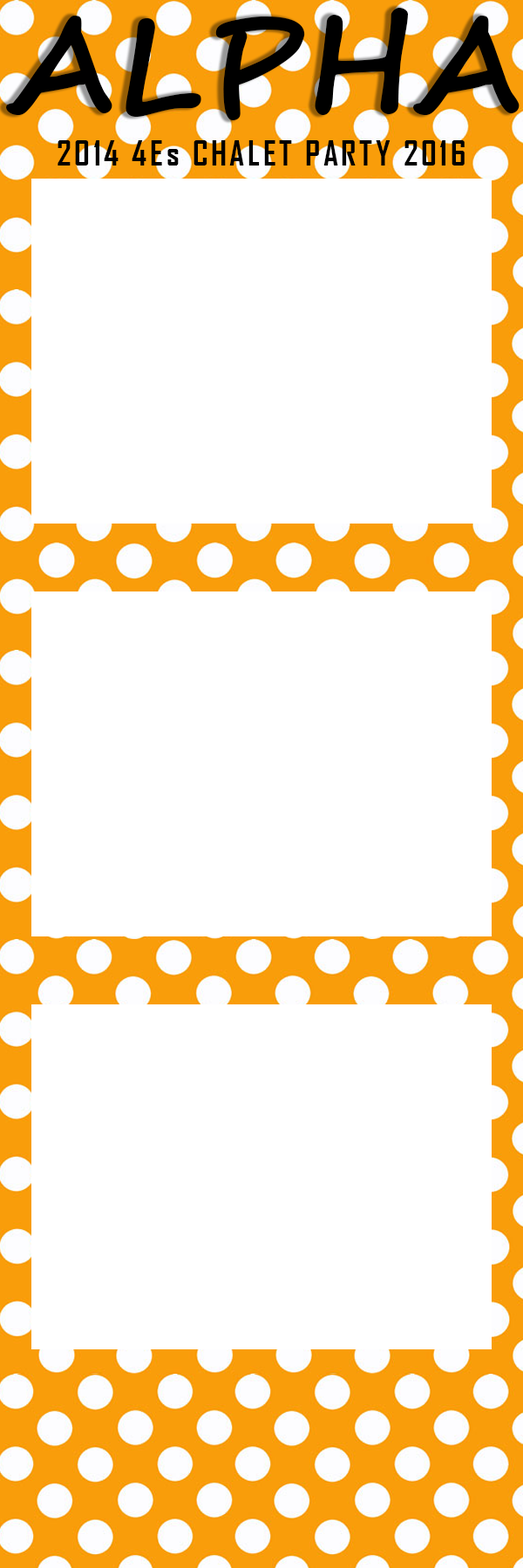
<style>
.page{position:relative;width:523px;height:1568px;background:#ffffff}
.page>*{position:absolute;margin:0}
.t1{font:130.7px "SegoeScript-Bold";color:#000000}
.t2{font:32.7px "AgencyFB-Bold";letter-spacing:0.1em;color:#000000}
</style>
<div class="page">
<p class="t1" style="left:6px;top:8px;width:513px;height:112px">ALPHA</p>
<p class="t2" style="left:57px;top:140px;width:407px;height:26px">2014 4Es CHALET PARTY 2016</p>
</div>
